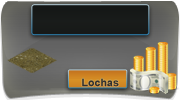
<style>
.page{position:relative;width:180px;height:100px}
.page>*{position:absolute;margin:0}
.t1{font:10.4px "Arial-BoldMT";color:#303030;scale:1.03 1}
.t2{font:20.8px "Arial-BoldMT";color:#303030;scale:1.03 1}
</style>
<div class="page">
<p class="t1" style="left:82px;top:78px;width:37px;height:9px"><span class="t2"><br></span>Lochas</p>
</div>
